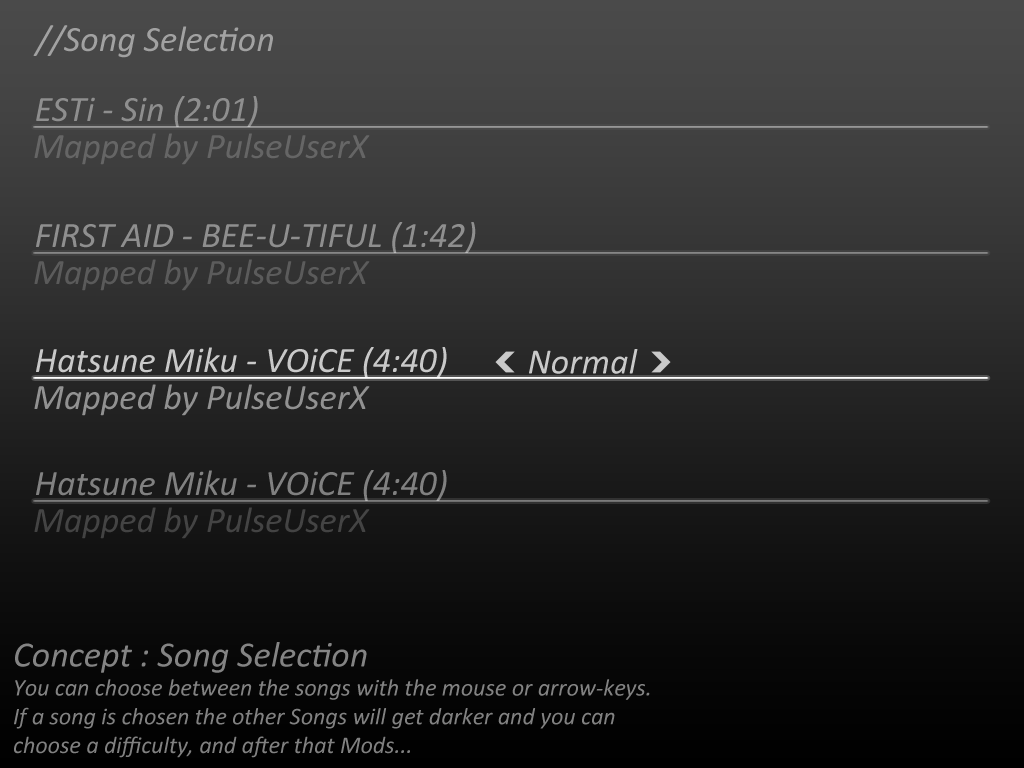
<style>
.page{position:relative;width:1024px;height:768px}
.page>*{position:absolute;margin:0}
.t1{font:36px "Calibri-Italic";color:#a2a2a2}
.t2{font:36px "Calibri-Italic";color:#8e8e8e}
.t3{font:36px "Calibri-Italic";color:#656565}
.t4{font:36px "Calibri-Italic";color:#5b5b5b}
.t5{font:36px "Calibri-Italic";color:#c9c9c9}
.t6{font:36px "Calibri-Italic";color:#919191}
.t7{font:36px "Calibri-Italic";color:#818181}
.t8{font:36px "Calibri-Italic";color:#444444}
.t9{font:24px "Calibri-Italic";color:#828282}
.t10{font:36px "Calibri-Italic";color:#828282}
</style>
<div class="page">
<p class="t1" style="left:33px;top:25px;width:240px;height:33px">//Song Selection</p>
<p class="t2" style="left:36px;top:96px;width:222px;height:31px">ESTi - Sin (2:01)</p>
<p class="t3" style="left:34px;top:133px;width:336px;height:32px">Mapped by PulseUserX</p>
<p class="t2" style="left:36px;top:222px;width:440px;height:31px">FIRST AID - BEE-U-TIFUL (1:42)</p>
<p class="t4" style="left:34px;top:259px;width:336px;height:32px">Mapped by PulseUserX</p>
<p class="t5" style="left:36px;top:347px;width:411px;height:31px">Hatsune Miku - VOiCE (4:40)</p>
<p class="t5" style="left:529px;top:349px;width:109px;height:25px">Normal</p>
<p class="t6" style="left:34px;top:384px;width:336px;height:32px">Mapped by PulseUserX</p>
<p class="t7" style="left:36px;top:470px;width:411px;height:31px">Hatsune Miku - VOiCE (4:40)</p>
<p class="t8" style="left:34px;top:507px;width:336px;height:32px">Mapped by PulseUserX</p>
<p class="t9" style="left:14px;top:642px;width:636px;height:116px"><span class="t10">Concept : Song Selection<br></span>You can choose between the songs with the mouse or arrow-keys.<br>If a song is chosen the other Songs will get darker and you can<br>choose a difficulty, and after that Mods...</p>
</div>
